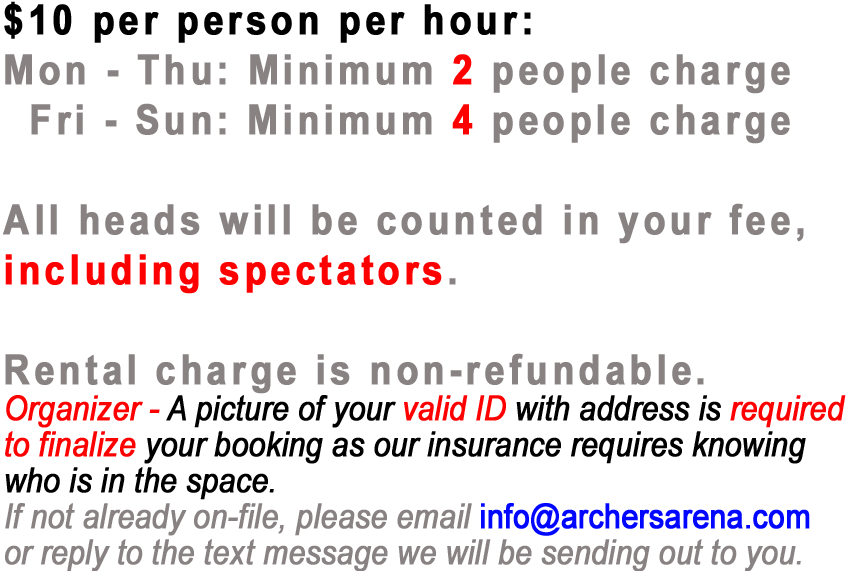
<style>
.page{position:relative;width:847px;height:571px;background:#ffffff}
.page>*{position:absolute;margin:0}
.t1{font:34.5px/36px "Arial-ItalicMT";letter-spacing:-0.01em;color:#000000;font-weight:bold;scale:0.87 1}
.t2{font:41.4px/50px "Arial-BoldMT";letter-spacing:0.1em;color:#000000;font-weight:bold;scale:0.87 1}
.t3{font:41.4px/50px "Arial-BoldMT";letter-spacing:0.1em;color:#888282;font-weight:bold;scale:0.87 1}
.t4{font:41.4px/50px "Arial-BoldMT";letter-spacing:0.1em;color:#ff0000;font-weight:bold;scale:0.87 1}
.t5{font:34.5px/36px "Arial-ItalicMT";letter-spacing:-0.01em;color:#ff0000;font-weight:bold;scale:0.87 1}
.t6{font:34.5px/36px "Arial-ItalicMT";letter-spacing:-0.01em;color:#fe0000;font-weight:bold;scale:0.87 1}
.t7{font:34.5px/36px "Arial-ItalicMT";letter-spacing:-0.01em;color:#888282;font-weight:bold;scale:0.87 1}
.t8{font:34.5px/36px "ArialMT";letter-spacing:-0.01em;color:#0006ff;font-weight:bold;scale:0.87 1}
</style>
<div class="page">
<p class="t1" style="left:3px;top:1px;width:843px;height:571px"><span class="t2">$10 per person per hour:<br></span><span class="t3">Mon - Thu: Minimum </span><span class="t4">2</span><span class="t3"> people charge<br>  Fri - Sun: Minimum </span><span class="t4">4</span><span class="t3"> people charge<br><br>All heads will be counted in your fee,<br></span><span class="t4">including spectators</span><span class="t3">.<br><br>Rental charge is non-refundable.<br></span><span class="t5">Organizer - </span>A picture of your <span class="t5">valid ID</span> with address is <span class="t6">required<br>to finalize</span> your booking as our insurance requires knowing<br>who is in the space.<br><span class="t7">If not already on-file, please email </span><span class="t8">info@archersarena.com</span><span class="t7"><br>or reply to the text message we will be sending out to you.</span></p>
</div>
